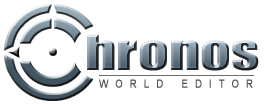
<style>
.page{position:relative;width:266px;height:104px;background:#ffffff}
.page>*{position:absolute;margin:0}
.t1{font:45px "Impact";scale:1.33 1}
.t2{font:27px "ArialMT";letter-spacing:0.26em;color:#515154;font-variant:small-caps;font-weight:bold;scale:0.85 1}
</style>
<div class="page">
<p class="t1" style="left:87px;top:34px;width:172px;height:37px">hronos</p>
<p class="t2" style="left:99px;top:79px;width:154px;height:9px">world editor</p>
</div>
